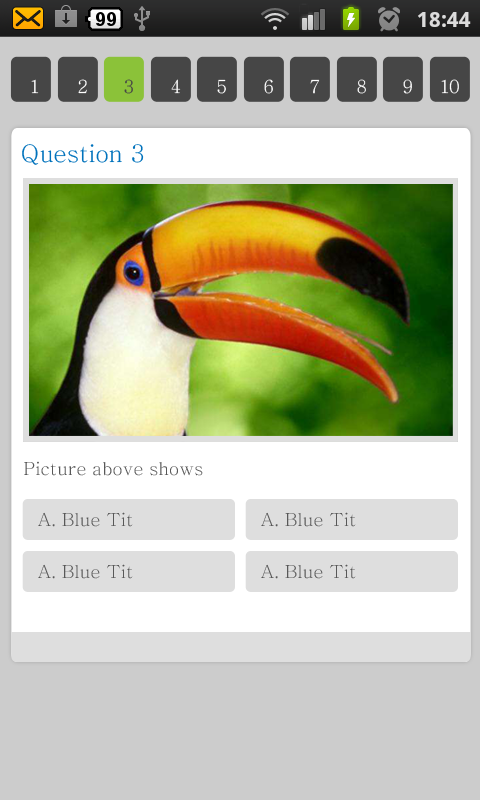
<style>
.page{position:relative;width:480px;height:800px;background:#cccccc}
.page>*{position:absolute;margin:0}
.t1{font:18px "Chrysanthi-Unicode";color:#ffffff}
.t2{font:18px "Chrysanthi-Unicode";color:#464646}
.t3{font:18px "Chrysanthi-Unicode"}
.t4{font:24px "Chrysanthi-Unicode";color:#0072bc}
.t5{font:18px "Chrysanthi-Unicode";color:#585858}
</style>
<div class="page">
<p class="t1" style="left:31px;top:79px;width:8px;height:15px">1</p>
<p class="t1" style="left:78px;top:79px;width:9px;height:15px">2</p>
<p class="t2" style="left:124px;top:79px;width:9px;height:15px">3</p>
<p class="t3" style="left:171px;top:79px;width:10px;height:15px">4</p>
<p class="t1" style="left:217px;top:79px;width:9px;height:15px">5</p>
<p class="t1" style="left:264px;top:79px;width:9px;height:15px">6</p>
<p class="t1" style="left:310px;top:79px;width:10px;height:15px">7</p>
<p class="t1" style="left:357px;top:79px;width:9px;height:15px">8</p>
<p class="t1" style="left:403px;top:79px;width:9px;height:15px">9</p>
<p class="t1" style="left:441px;top:79px;width:18px;height:15px">10</p>
<p class="t4" style="left:22px;top:144px;width:122px;height:21px">Question 3</p>
<p class="t5" style="left:24px;top:461px;width:179px;height:15px">Picture above shows</p>
<p class="t5" style="left:38px;top:512px;width:95px;height:15px">A. Blue Tit</p>
<p class="t5" style="left:261px;top:512px;width:95px;height:15px">A. Blue Tit</p>
<p class="t5" style="left:38px;top:564px;width:95px;height:15px">A. Blue Tit</p>
<p class="t5" style="left:261px;top:564px;width:95px;height:15px">A. Blue Tit</p>
</div>
